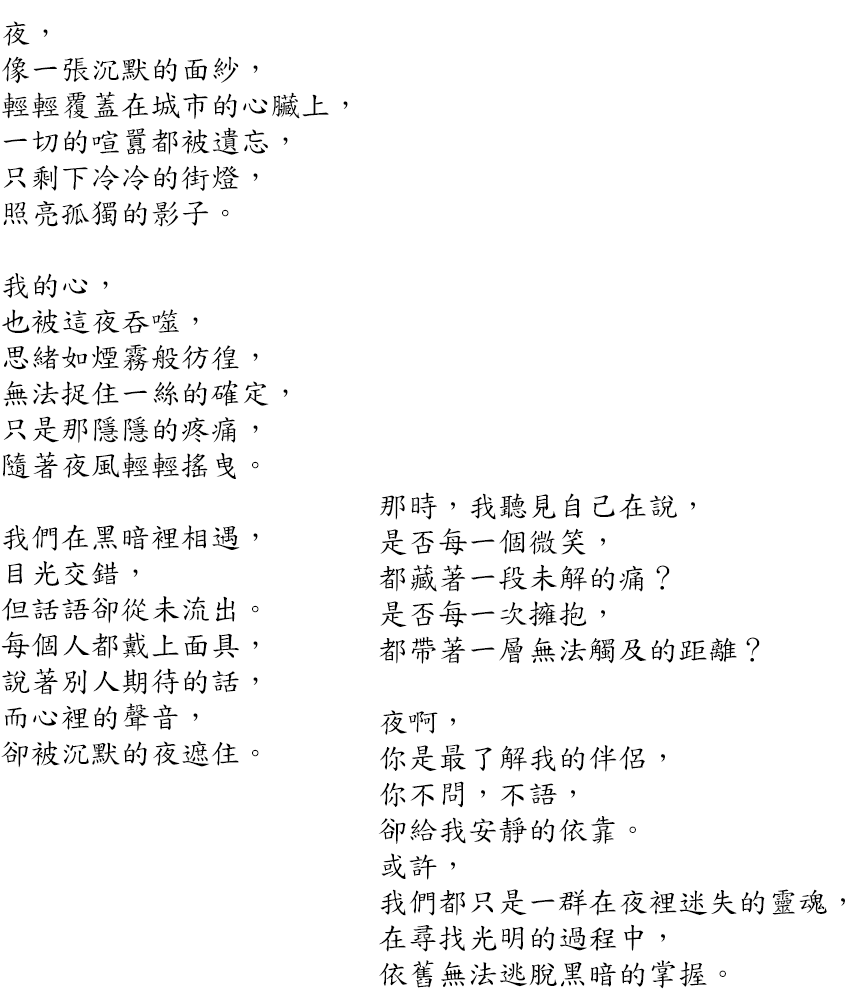
<style>
.page{position:relative;width:850px;height:1000px;background:#ffffff}
.page>*{position:absolute;margin:0}
.t1{font:30px "DFKaiShu-SB-Estd-BF";color:#000000}
</style>
<div class="page">
<p class="t1" style="left:1px;top:21px;width:347px;height:747px;text-align:justify">夜，<br>像一張沉默的面紗，<br>輕輕覆蓋在城市的心臟上，<br>一切的喧囂都被遺忘，<br>只剩下冷冷的街燈，<br>照亮孤獨的影子。<br><br>我的心，<br>也被這夜吞噬，<br>思緒如煙霧般彷徨，<br>無法捉住一絲的確定，<br>只是那隱隱的疼痛，<br>隨著夜風輕輕搖曳。<br><br>我們在黑暗裡相遇，<br>目光交錯，<br>但話語卻從未流出。<br>每個人都戴上面具，<br>說著別人期待的話，<br>而心裡的聲音，<br>卻被沉默的夜遮住。</p>
<p class="t1" style="left:378px;top:492px;width:467px;height:497px;text-align:justify">那時，我聽見自己在說，<br>是否每一個微笑，<br>都藏著一段未解的痛？<br>是否每一次擁抱，<br>都帶著一層無法觸及的距離？<br><br>夜啊，<br>你是最了解我的伴侶，<br>你不問，不語，<br>卻給我安靜的依靠。<br>或許，<br>我們都只是一群在夜裡迷失的靈魂，<br>在尋找光明的過程中，<br>依舊無法逃脫黑暗的掌握。</p>
</div>
